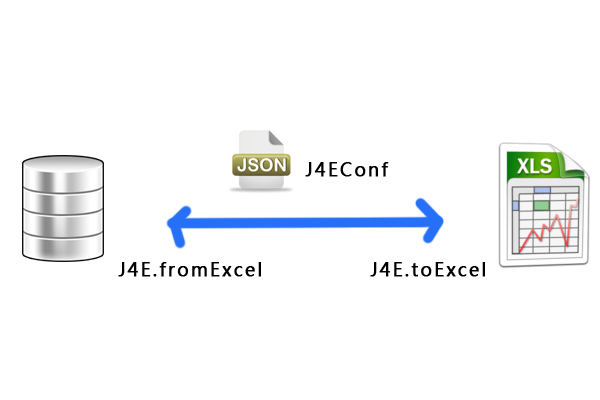
<style>
.page{position:relative;width:600px;height:400px;background:#ffffff}
.page>*{position:absolute;margin:0}
.t1{font:18px "MicrosoftYaHei";letter-spacing:0.1em;color:#000000;font-weight:bold}
</style>
<div class="page">
<p class="t1" style="left:305px;top:162px;width:84px;height:15px">J4EConf</p>
<p class="t1" style="left:118px;top:262px;width:143px;height:15px">J4E.fromExcel</p>
<p class="t1" style="left:370px;top:262px;width:115px;height:15px">J4E.toExcel</p>
</div>
